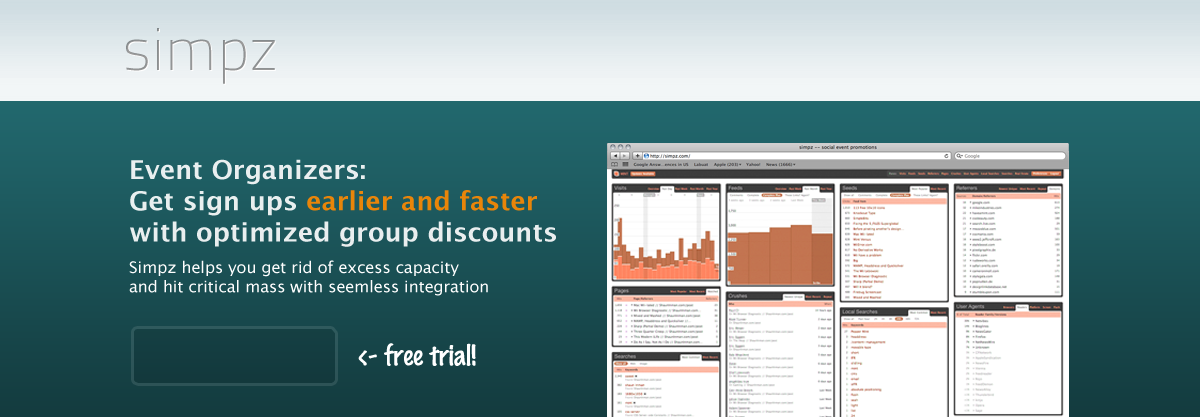
<style>
.page{position:relative;width:1200px;height:417px}
.page>*{position:absolute;margin:0}
.t1{font:60px "TitilliumText14L-Bold";color:#929495}
.t2{font:26px "LucidaGrande-Bold";color:#ffffff}
.t3{font:26px "LucidaGrande-Bold";color:#ff8a00}
.t4{font:16px "LucidaGrande";color:#fefefe}
.t5{font:26px "MarkerFelt-Thin";color:#ffffff}
</style>
<div class="page">
<p class="t1" style="left:126px;top:28px;width:149px;height:56px">simpz</p>
<p class="t2" style="left:130px;top:159px;width:426px;height:88px;opacity:0.9">Event Organizers: <br>Get sign ups <span class="t3">earlier and faster</span>  <br>with optimized group discounts</p>
<p class="t4" style="left:129px;top:260px;width:359px;height:36px">Simpz helps you get rid of excess capacity <br>and hit critical mass with seemless integration</p>
<p class="t5" style="left:358px;top:343px;width:118px;height:23px">&lt;- free trial!</p>
</div>
